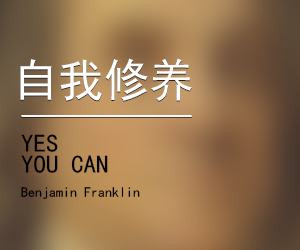
<style>
.page{position:relative;width:300px;height:250px}
.page>*{position:absolute;margin:0}
.t1{font:45.3px "SimHei";color:#ffffff}
.t2{font:25px "SimHei";color:#000000}
.t3{font:14px "SimHei";color:#000000}
</style>
<div class="page">
<p class="t1" style="left:20px;top:59px;width:172px;height:43px">自我修养</p>
<p class="t1" style="left:20px;top:58px;width:172px;height:43px">自我修养</p>
<p class="t2" style="left:21px;top:134px;width:37px;height:18px">YES</p>
<p class="t2" style="left:21px;top:155px;width:87px;height:18px">YOU CAN</p>
<p class="t3" style="left:21px;top:187px;width:119px;height:12px">Benjamin Franklin</p>
</div>
